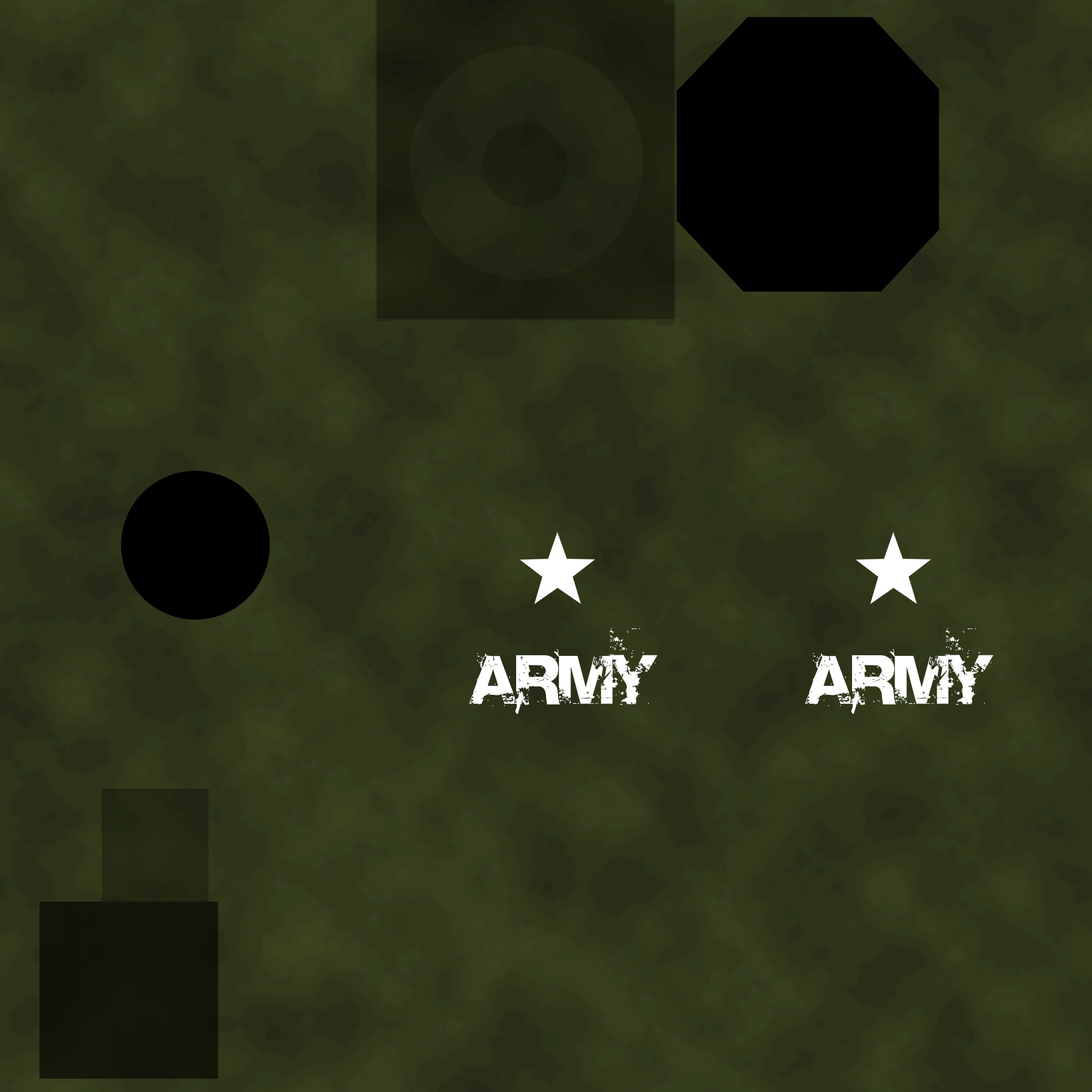
<style>
.page{position:relative;width:1092px;height:1092px;background:#2f331a}
.page>*{position:absolute;margin:0}
.t1{font:86.7px "Base02";color:#ffffff;font-variant:small-caps}
</style>
<div class="page">
<p class="t1" style="left:469px;top:628px;width:188px;height:86px">army</p>
<p class="t1" style="left:805px;top:628px;width:188px;height:86px">army</p>
</div>
